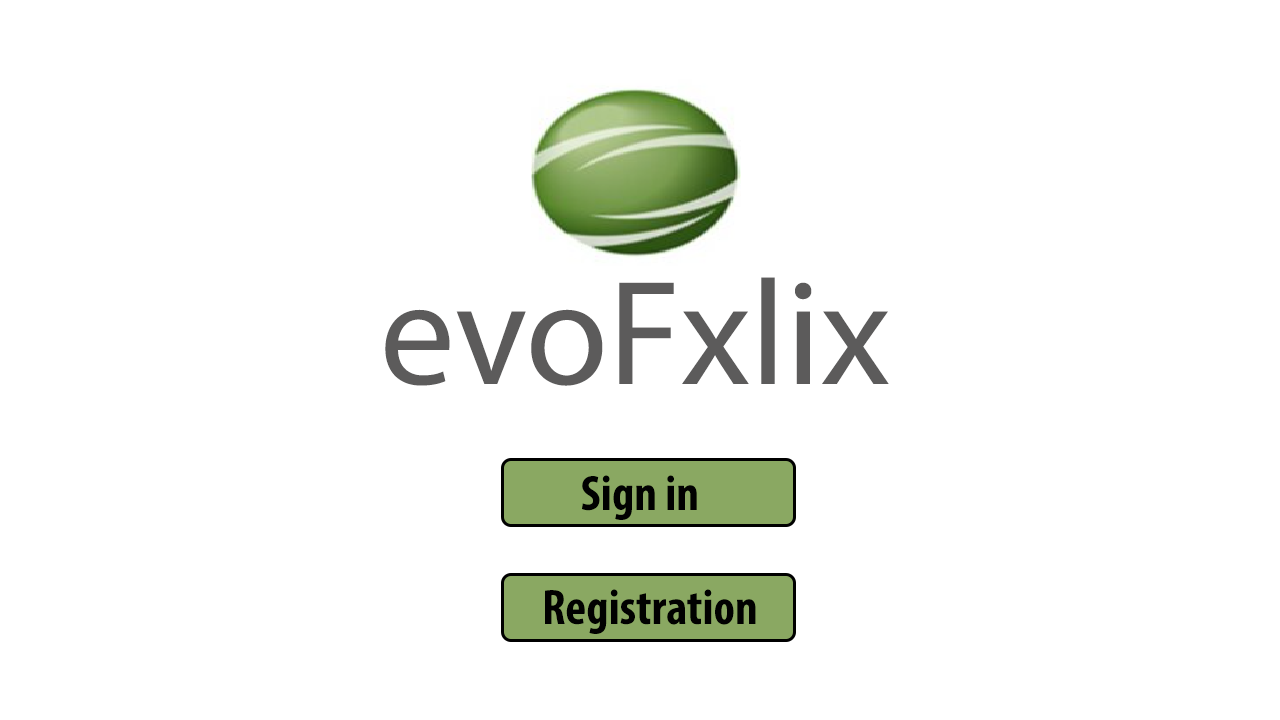
<style>
.page{position:relative;width:1280px;height:720px;background:#ffffff}
.page>*{position:absolute;margin:0}
.t1{font:150px "MyriadPro-Regular";color:#5c5b5b}
.t2{font:50px "MyriadPro-BoldCond";color:#010101}
</style>
<div class="page">
<p class="t1" style="left:385px;top:277px;width:504px;height:109px">evoFxlix</p>
<p class="t2" style="left:582px;top:475px;width:115px;height:45px">Sign in</p>
<p class="t2" style="left:545px;top:589px;width:211px;height:45px">Registration</p>
</div>
